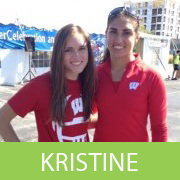
<style>
.page{position:relative;width:180px;height:180px}
.page>*{position:absolute;margin:0}
.t1{font:26.7px "MyriadPro-Regular";color:#faf7f7}
</style>
<div class="page">
<p class="t1" style="left:42px;top:153px;width:96px;height:18px">KRISTINE</p>
</div>
